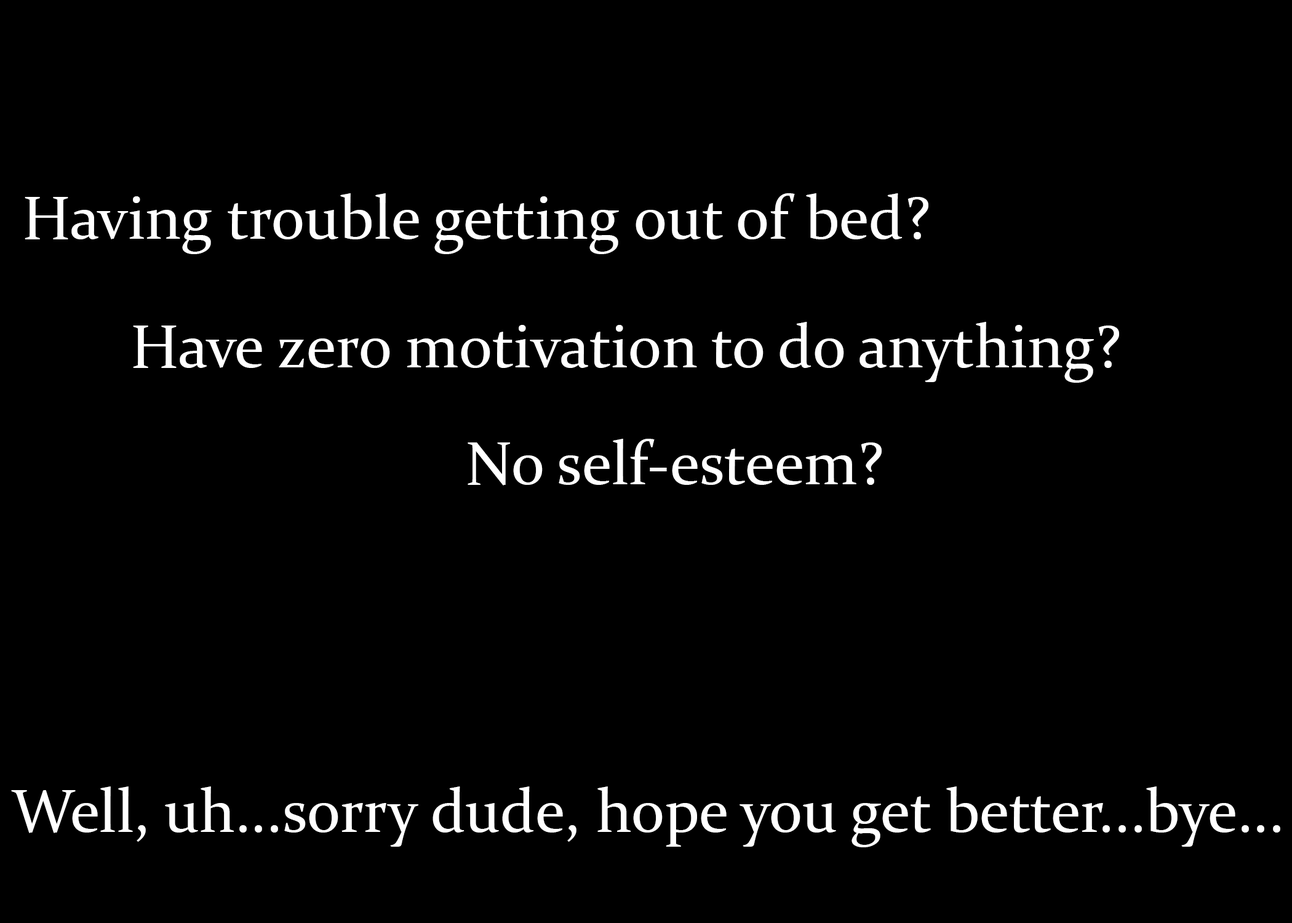
<style>
.page{position:relative;width:1292px;height:923px;background:#000000}
.page>*{position:absolute;margin:0}
.t1{font:61.5px "Constantia";color:#ffffff}
</style>
<div class="page">
<p class="t1" style="left:25px;top:193px;width:903px;height:61px">Having trouble getting out of bed?</p>
<p class="t1" style="left:133px;top:322px;width:986px;height:61px">Have zero motivation to do anything?</p>
<p class="t1" style="left:468px;top:439px;width:414px;height:46px">No self-esteem?</p>
<p class="t1" style="left:11px;top:786px;width:1269px;height:61px">Well, uh...sorry dude, hope you get better...bye...</p>
</div>
